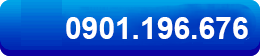
<style>
.page{position:relative;width:260px;height:56px}
.page>*{position:absolute;margin:0}
.t1{font:30px "Arial-BoldMT";color:#ffffff}
</style>
<div class="page">
<p class="t1" style="left:66px;top:17px;width:182px;height:22px">0901.196.676</p>
</div>
